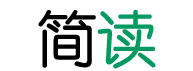
<style>
.page{position:relative;width:193px;height:71px;background:#ffffff}
.page>*{position:absolute;margin:0}
.t1{font:60px "STYuanti-TC-Regular";color:#000000}
.t2{font:60px "STYuanti-TC-Regular";color:#009a61}
</style>
<div class="page">
<p class="t1" style="left:38px;top:9px;width:118px;height:60px">简<span class="t2">读</span></p>
</div>
